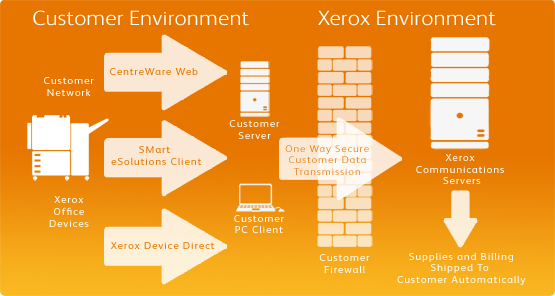
<style>
.page{position:relative;width:555px;height:296px;background:#e67600}
.page>*{position:absolute;margin:0}
.t1{font:20.7px "XeroxSans-Light";color:#ffffff;scale:1.12 1}
.t2{font:9.8px "XeroxSans";letter-spacing:0.075em;color:#ffffff;scale:1.12 1}
.t3{font:9.8px "XeroxSans";letter-spacing:0.075em;color:#e67600;scale:1.12 1}
.t4{font:9.8px "XeroxSans-Light";letter-spacing:0.075em;color:#e67600;scale:1.12 1}
.t5{font:9.8px "XeroxSans";letter-spacing:0.075em;color:#fffefe;scale:1.12 1}
.t6{font:9.8px "XeroxSans";letter-spacing:0.075em;color:#fefefe;scale:1.12 1}
</style>
<div class="page">
<p class="t1" style="left:33px;top:10px;width:216px;height:16px">Customer Environment</p>
<p class="t1" style="left:318px;top:10px;width:178px;height:16px">Xerox Environment</p>
<p class="t2" style="left:44px;top:77px;width:50px;height:19px;text-align:center">Customer<br>Network</p>
<p class="t3" style="left:110px;top:68px;width:88px;height:7px">CentreWare Web</p>
<p class="t2" style="left:229px;top:120px;width:51px;height:19px;text-align:center">Customer<br>Server</p>
<p class="t3" style="left:111px;top:146px;width:91px;height:19px;text-align:center">SMart <br>eSolutions Client</p>
<p class="t4" style="left:285px;top:145px;width:84px;height:30px;text-align:center">One Way Secure<br>Customer Data<br>Transmission</p>
<p class="t5" style="left:416px;top:154px;width:88px;height:30px;text-align:center">Xerox <br>Communications <br>Servers</p>
<p class="t6" style="left:49px;top:196px;width:40px;height:31px;text-align:center">Xerox<br>Office<br>Devices</p>
<p class="t2" style="left:234px;top:215px;width:50px;height:18px;text-align:center">Customer<br>PC Client</p>
<p class="t3" style="left:111px;top:242px;width:104px;height:7px">Xerox Device Direct</p>
<p class="t5" style="left:319px;top:254px;width:51px;height:19px;text-align:center">Customer<br>Firewall</p>
<p class="t6" style="left:397px;top:252px;width:129px;height:33px;text-align:center">Supplies and Billing<br>Shipped To <br>Customer Automatically</p>
</div>
